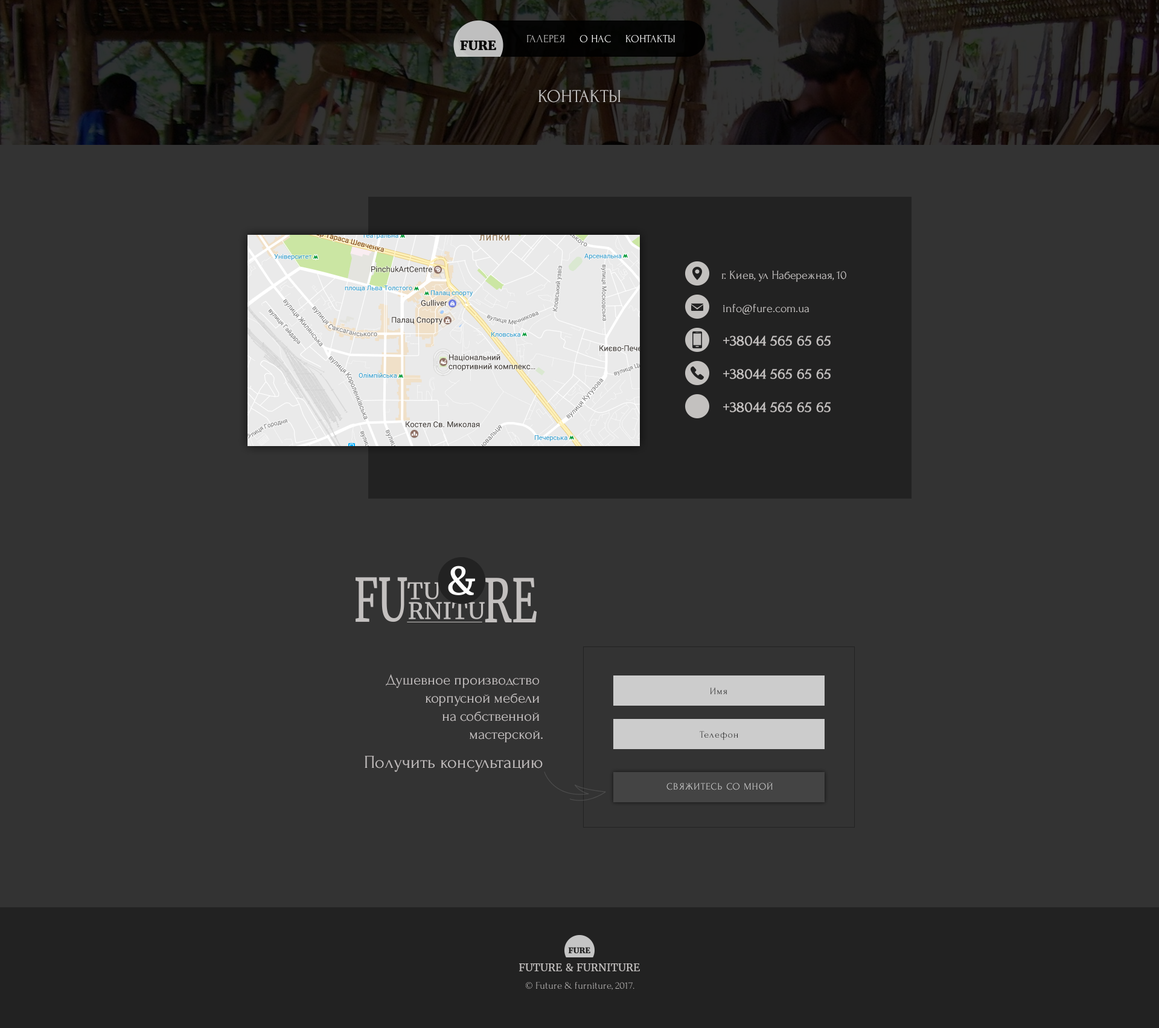
<style>
.page{position:relative;width:1159px;height:1028px;background:#333333}
.page>*{position:absolute;margin:0}
.t1{font:18.1px "Forum";color:#c3c0bf}
.t2{font:12.1px "Forum";color:#c3c0bf}
.t3{font:15.1px "Forum";color:#c3c0bf;font-weight:bold}
.t4{font:15.1px/18.1px "Forum";color:#c3bfbf}
.t5{font:18.1px/29px "Forum";color:#c3bfbf}
.t6{font:9.7px "Forum";letter-spacing:0.083em;color:#212121}
.t7{font:9.7px "Forum";letter-spacing:0.083em;color:#202020}
.t8{font:9.7px "Forum";letter-spacing:0.083em;color:#cccccc}
</style>
<div class="page">
<p class="t1" style="left:539px;top:89px;width:82px;height:14px">КОНТАКТЫ</p>
<p class="t2" style="left:722px;top:271px;width:125px;height:11px">г. Киев, ул Набережная, 10</p>
<p class="t2" style="left:723px;top:304px;width:87px;height:11px">info@fure.com.ua</p>
<p class="t3" style="left:723px;top:336px;width:108px;height:10px">+38044 565 65 65</p>
<p class="t3" style="left:723px;top:369px;width:108px;height:10px">+38044 565 65 65</p>
<p class="t3" style="left:723px;top:402px;width:108px;height:10px">+38044 565 65 65</p>
<p class="t4" style="left:365px;top:675px;width:178px;height:97px;text-align:right">Душевное производство <br>корпусной мебели <br>на собственной <br>мастерской.<br><span class="t5">Получить консультацию</span></p>
<p class="t6" style="left:710px;top:688px;width:18px;height:7px">Имя</p>
<p class="t7" style="left:700px;top:731px;width:39px;height:9px">Телефон</p>
<p class="t8" style="left:667px;top:782px;width:106px;height:8px">СВЯЖИТЕСЬ СО МНОЙ</p>
</div>
